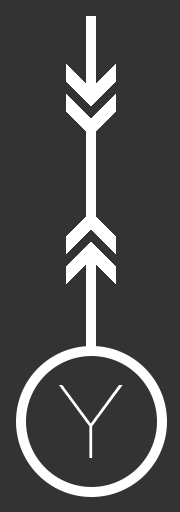
<style>
.page{position:relative;width:180px;height:512px;background:#333333}
.page>*{position:absolute;margin:0}
.t1{font:91px "Adequate-ExtraLight";color:#ffffff}
</style>
<div class="page">
<p class="t1" style="left:58px;top:385px;width:65px;height:73px">Y</p>
</div>
